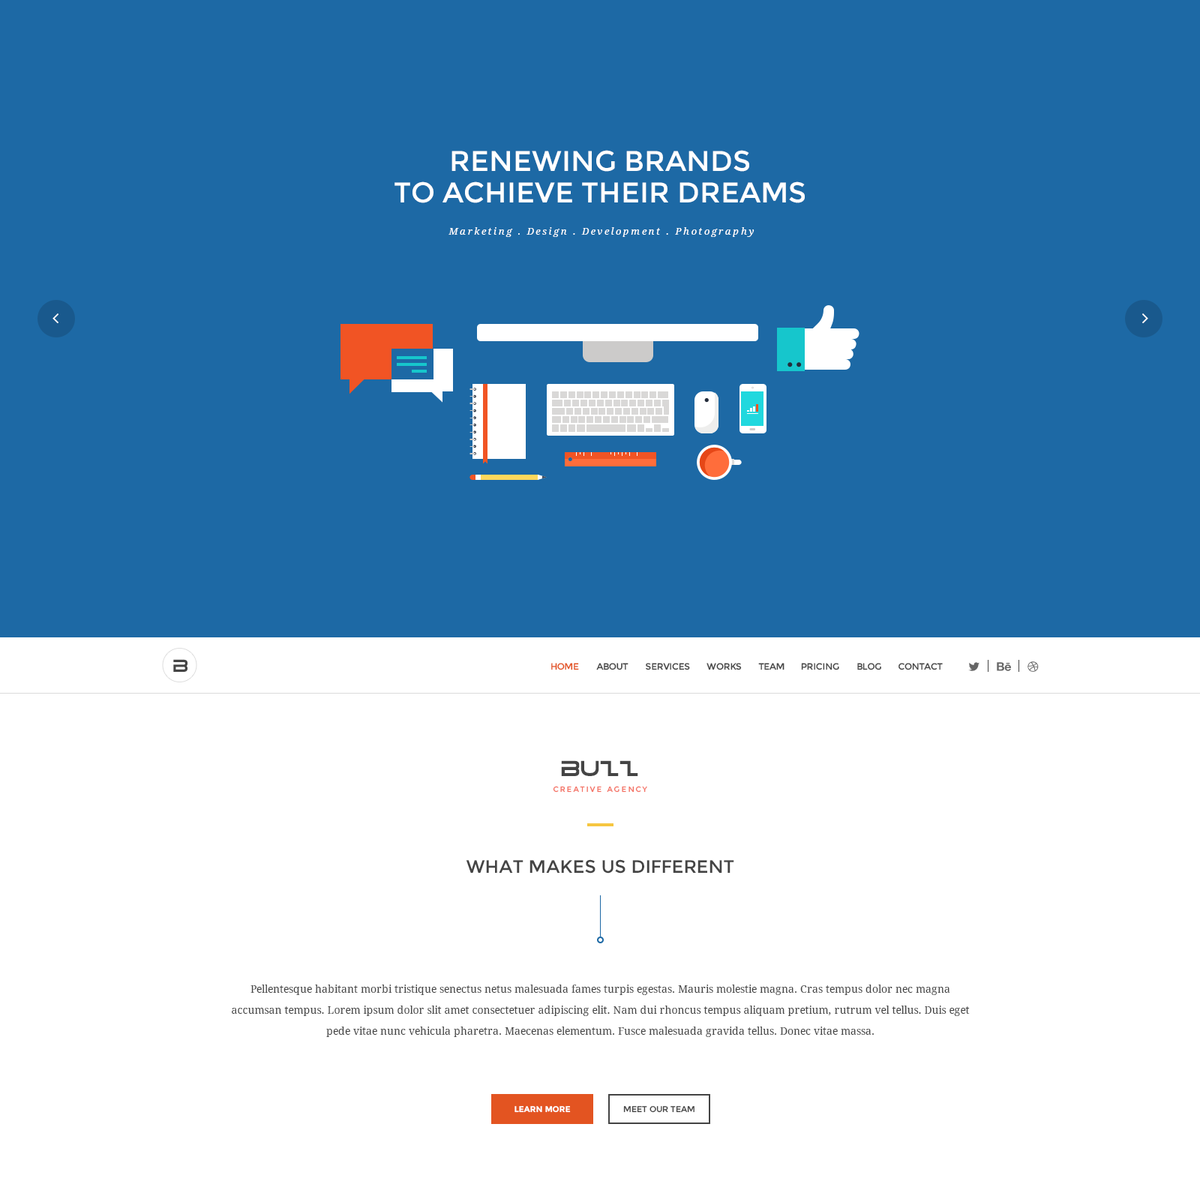
<style>
.page{position:relative;width:1200px;height:1181px;background:#1d69a5}
.page>*{position:absolute;margin:0}
.t1{font:28.5px/31.4px "Montserrat-Regular";color:#ffffff}
.t2{font:9.8px "DroidSerif-Italic";letter-spacing:0.2em;color:#ffffff}
.t3{font:18px "Tele-MarinesBold";color:#444444}
.t4{font:9px "Montserrat-Regular";letter-spacing:-0.025em;color:#e35421}
.t5{font:9px "Montserrat-Regular";letter-spacing:-0.025em;color:#444444}
.t6{font:22.5px "Tele-MarinesBold";color:#444444}
.t7{font:7.5px "Montserrat-Regular";letter-spacing:0.2em;color:#f47264}
.t8{font:18px "Montserrat-Regular";color:#444444}
.t9{font:10.5px/21px "DroidSerif";color:#444444}
.t10{font:8.3px "Montserrat-Bold";color:#ffffff}
.t11{font:8.3px "Montserrat-Regular";color:#444444}
</style>
<div class="page">
<p class="t1" style="left:395px;top:150px;width:410px;height:53px;text-align:center">RENEWING BRANDS<br>TO ACHIEVE THEIR DREAMS</p>
<p class="t2" style="left:449px;top:227px;width:306px;height:10px">Marketing . Design . Development . Photography</p>
<p class="t3" style="left:173px;top:659px;width:15px;height:13px">B</p>
<p class="t4" style="left:551px;top:663px;width:28px;height:8px">HOME</p>
<p class="t5" style="left:596px;top:663px;width:33px;height:8px">ABOUT</p>
<p class="t5" style="left:646px;top:663px;width:44px;height:8px">SERVICES</p>
<p class="t5" style="left:707px;top:663px;width:35px;height:8px">WORKS</p>
<p class="t5" style="left:758px;top:663px;width:27px;height:8px">TEAM</p>
<p class="t5" style="left:801px;top:663px;width:38px;height:8px">PRICING</p>
<p class="t5" style="left:857px;top:663px;width:24px;height:8px">BLOG</p>
<p class="t5" style="left:899px;top:663px;width:44px;height:8px">CONTACT</p>
<p class="t6" style="left:561px;top:761px;width:77px;height:15px">Buzz</p>
<p class="t7" style="left:553px;top:786px;width:94px;height:7px">CREATIVE AGENCY</p>
<p class="t8" style="left:466px;top:860px;width:268px;height:14px">WHAT MAKES US DIFFERENT</p>
<p class="t9" style="left:232px;top:985px;width:738px;height:52px;text-align:center">Pellentesque habitant morbi tristique senectus netus malesuada fames turpis egestas. Mauris molestie magna. Cras tempus dolor nec magna<br>accumsan tempus. Lorem ipsum dolor slit amet consectetuer adipiscing elit. Nam dui rhoncus tempus aliquam pretium, rutrum vel tellus. Duis eget pede vitae nunc vehicula pharetra. Maecenas elementum. Fusce malesuada gravida tellus. Donec vitae massa.</p>
<p class="t10" style="left:515px;top:1106px;width:56px;height:7px">LEARN MORE</p>
<p class="t11" style="left:623px;top:1106px;width:72px;height:7px">MEET OUR TEAM</p>
</div>
